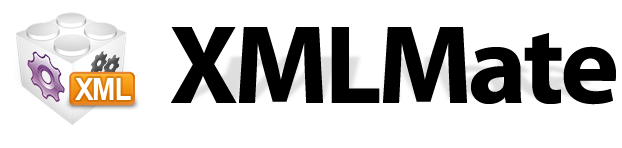
<style>
.page{position:relative;width:622px;height:148px;background:#ffffff}
.page>*{position:absolute;margin:0}
.t1{font:112.8px "Myriad-Bold";letter-spacing:-0.04em;color:#000000}
.t2{font:30.8px "Arial-BoldMT";letter-spacing:-0.04em;color:#ffffff;scale:0.9 1}
</style>
<div class="page">
<p class="t1" style="left:171px;top:27px;width:445px;height:78px">XMLMate</p>
<p class="t2" style="left:75px;top:78px;width:56px;height:22px">XML</p>
</div>
